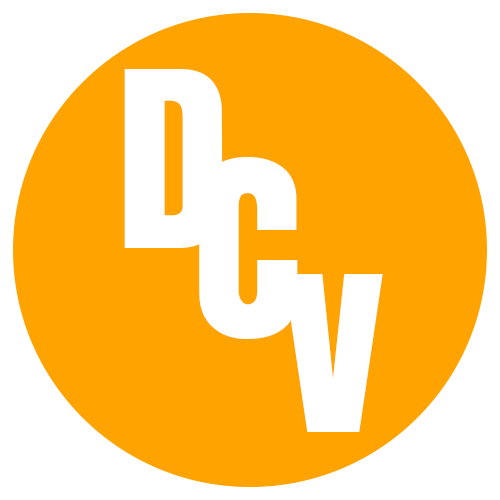
<style>
.page{position:relative;width:500px;height:500px;background:#ffa301}
.page>*{position:absolute;margin:0}
.t1{font:230px "Anton";color:#ffffff}
.t2{font:203px "Anton";color:#ffffff;scale:1.09 1}
</style>
<div class="page">
<p class="t1" style="left:124px;top:69px;width:99px;height:179px">D</p>
<p class="t1" style="left:199px;top:157px;width:99px;height:182px">C</p>
<p class="t2" style="left:283px;top:274px;width:100px;height:158px">V</p>
</div>
